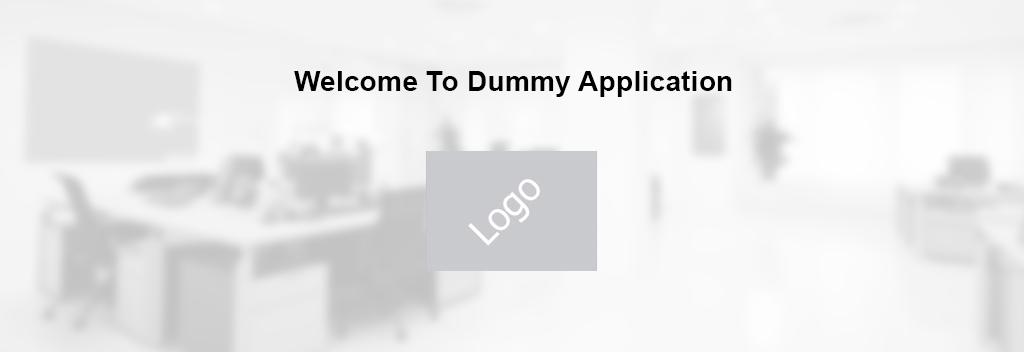
<style>
.page{position:relative;width:1024px;height:352px}
.page>*{position:absolute;margin:0}
.t1{font:28px "Arial-BoldMT";letter-spacing:0.01em;color:#000000}
</style>
<div class="page">
<p class="t1" style="left:294px;top:71px;width:438px;height:26px">Welcome To Dummy Application</p>
</div>
